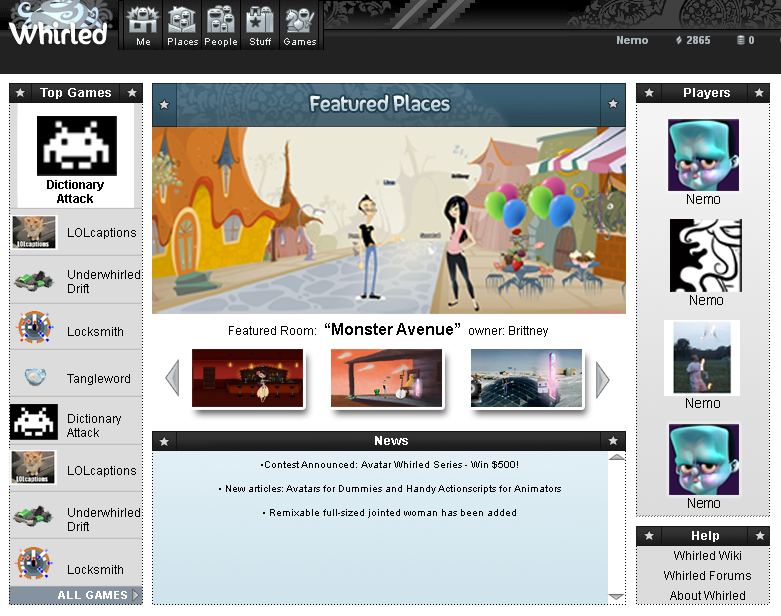
<style>
.page{position:relative;width:781px;height:616px}
.page>*{position:absolute;margin:0}
.t1{font:12px "Arial-BoldMT";color:#ffffff;scale:1.1 1}
.t2{font:18px "SunnySide";letter-spacing:0.005em}
.t3{font:12px "Arial-BoldMT";color:#000000}
.t4{font:14px "ArialMT";color:#000000}
.t5{font:12px "ArialMT";color:#000000}
.t6{font:16px "Arial-BoldMT";color:#000000}
.t7{font:10px "ArialMT";color:#000000}
.t8{font:12px/10px "ArialMT";color:#000000}
.t9{font:11px "Arial-BoldMT";letter-spacing:0.07em;color:#ffffff}
</style>
<div class="page">
<p class="t1" style="left:40px;top:88px;width:71px;height:11px">Top Games</p>
<p class="t1" style="left:684px;top:88px;width:46px;height:11px">Players</p>
<p class="t2" style="left:310px;top:94px;width:140px;height:18px">Featured Places</p>
<p class="t3" style="left:47px;top:180px;width:57px;height:23px;text-align:center">Dictionary<br>Attack</p>
<p class="t4" style="left:687px;top:194px;width:33px;height:10px">Nemo</p>
<p class="t5" style="left:68px;top:228px;width:68px;height:11px">LOLcaptions</p>
<p class="t5" style="left:68px;top:270px;width:72px;height:23px">Underwhirled<br>Drift</p>
<p class="t4" style="left:690px;top:295px;width:33px;height:10px">Nemo</p>
<p class="t5" style="left:68px;top:327px;width:55px;height:9px">Locksmith</p>
<p class="t6" style="left:229px;top:323px;width:319px;height:14px"><span class="t5">Featured Room:  </span>“Monster Avenue”  <span class="t5">owner: Brittney</span></p>
<p class="t5" style="left:67px;top:374px;width:63px;height:11px">Tangleword</p>
<p class="t4" style="left:686px;top:398px;width:34px;height:10px">Nemo</p>
<p class="t5" style="left:67px;top:414px;width:54px;height:23px">Dictionary<br>Attack</p>
<p class="t1" style="left:375px;top:436px;width:33px;height:9px">News</p>
<p class="t7" style="left:219px;top:461px;width:342px;height:57px;text-align:center">•Contest Announced: Avatar Whirled Series - Win $500!<br><br>• New articles: Avatars for Dummies and Handy Actionscripts for Animators <br><br>• Remixable full-sized jointed woman has been added</p>
<p class="t5" style="left:68px;top:466px;width:68px;height:11px">LOLcaptions</p>
<p class="t5" style="left:68px;top:508px;width:72px;height:23px">Underwhirled<br>Drift</p>
<p class="t4" style="left:688px;top:498px;width:32px;height:10px">Nemo</p>
<p class="t1" style="left:692px;top:531px;width:27px;height:11px">Help</p>
<p class="t8" style="left:664px;top:551px;width:87px;height:49px;text-align:center">Whirled Wiki<br><br>Whirled Forums<br><br>About Whirled</p>
<p class="t5" style="left:68px;top:565px;width:55px;height:9px">Locksmith</p>
<p class="t9" style="left:58px;top:591px;width:69px;height:8px">ALL GAMES</p>
</div>
